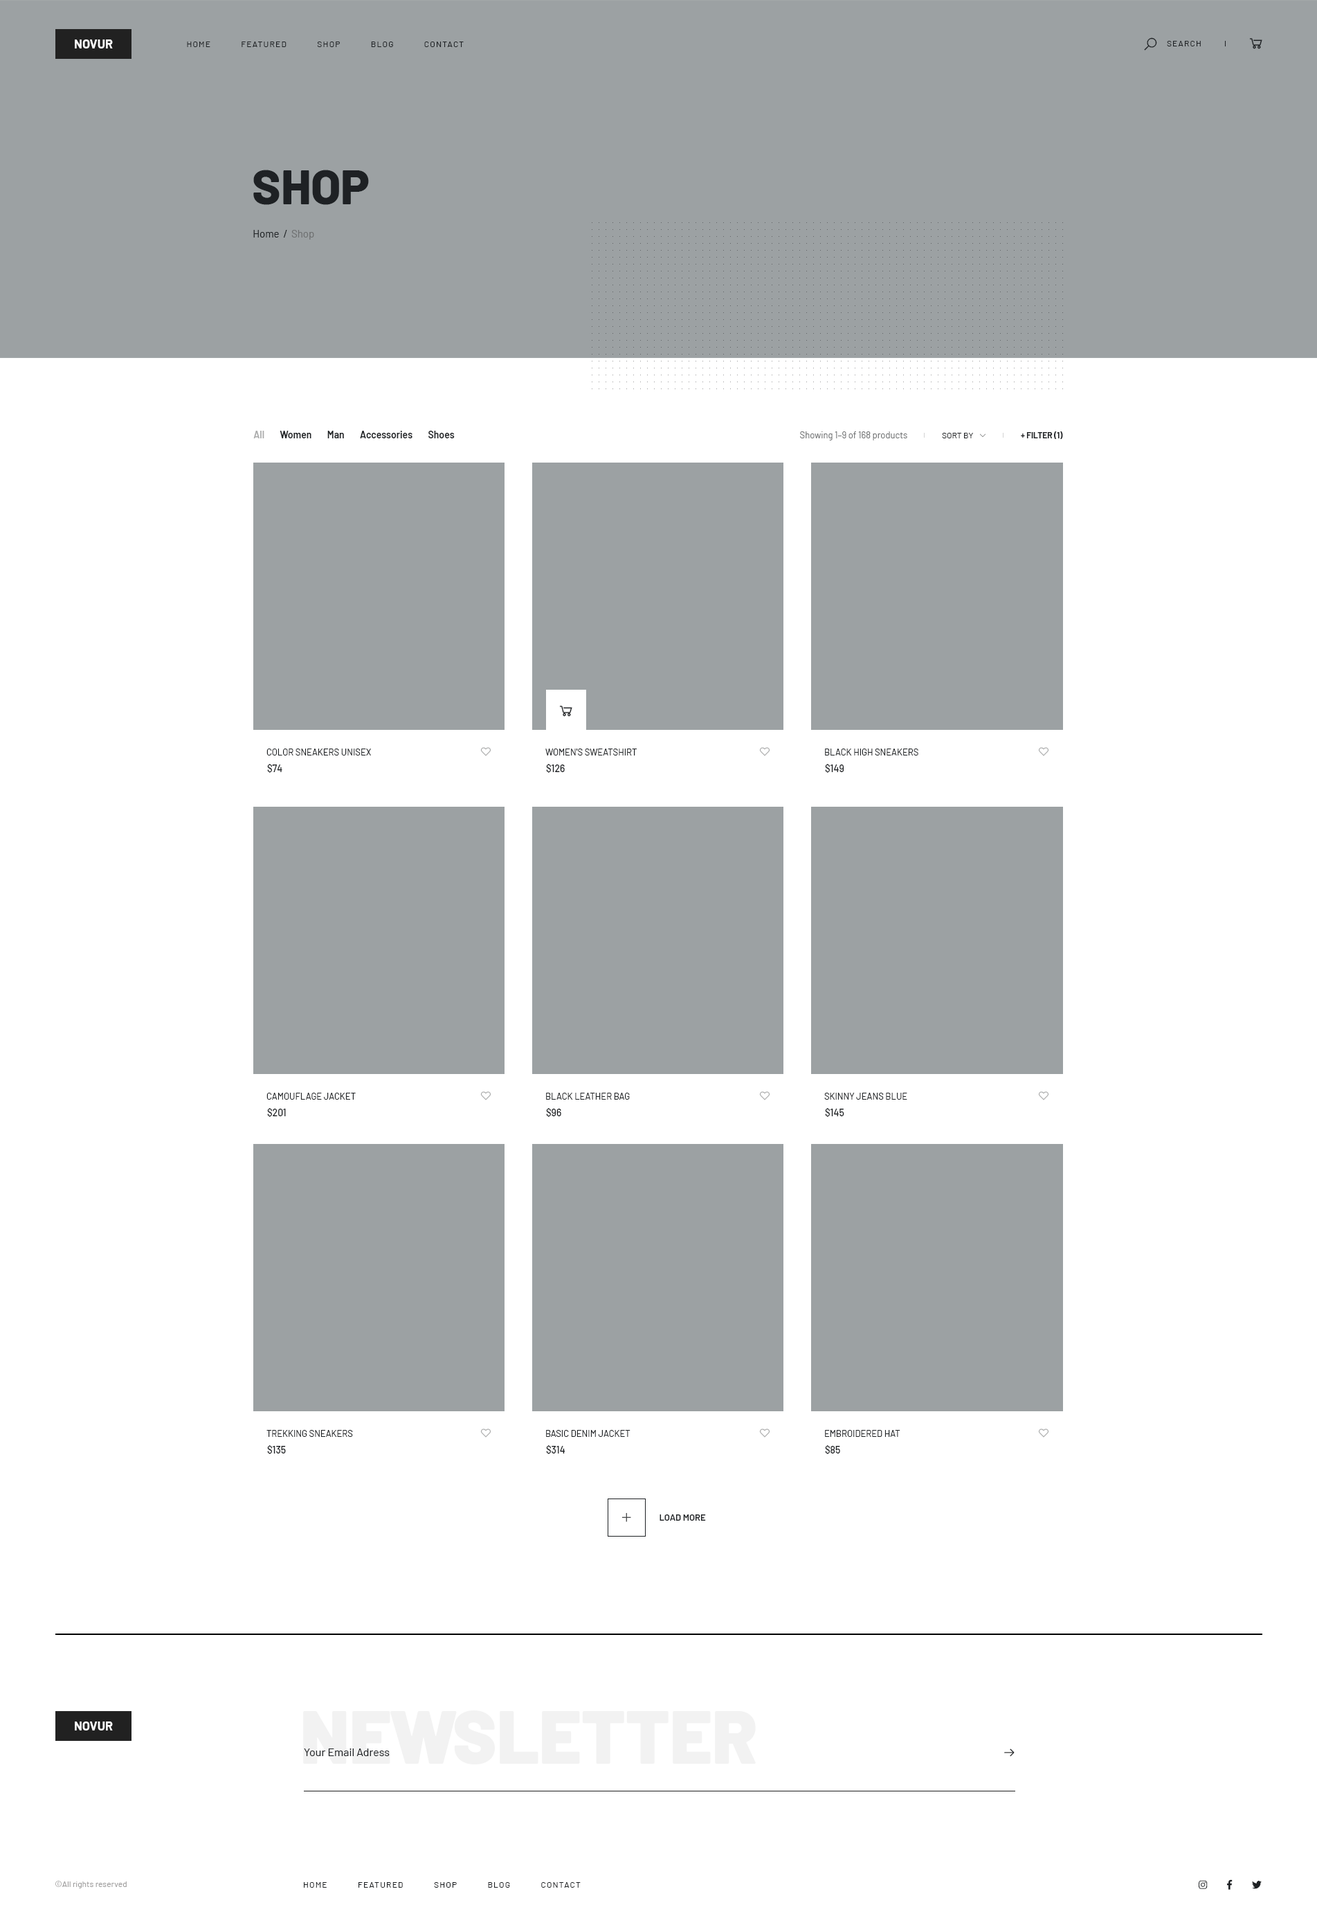
<style>
.page{position:relative;width:1317px;height:1932px;background:#ffffff}
.page>*{position:absolute;margin:0}
.t1{font:12.5px "Barlow-Bold";color:#fefefe;text-transform:uppercase}
.t2{font:8.3px "Barlow-Regular";letter-spacing:0.1em;color:#1e2124;text-transform:uppercase}
.t3{font:48.5px "Barlow-ExtraBold";color:#1e2124;text-transform:uppercase}
.t4{font:10.4px "Barlow-Regular";color:#1e2124}
.t5{font:10.4px "Barlow-Regular";color:#6e7071}
.t6{font:9.7px "Barlow-SemiBold";color:#1e2124}
.t7{font:9.7px "Barlow-SemiBold";color:#aaabab}
.t8{font:9px "Barlow-Regular";color:#6e7071}
.t9{font:8.3px "Barlow-Regular";color:#1e2124;text-transform:uppercase}
.t10{font:8.3px "Barlow-Bold";color:#1e2124;text-transform:uppercase}
.t11{font:9px "Barlow-Regular";color:#1e2124;text-transform:uppercase}
.t12{font:9.7px "Barlow-Medium";color:#1e2124}
.t13{font:9px "Barlow-SemiBold";color:#1e2124;text-transform:uppercase}
.t14{font:74.1px "Barlow-Black";color:#f2f2f2}
.t15{font:11.1px "Barlow-Regular";color:#1e2124}
.t16{font:8.3px "Barlow-Regular";color:#9e9d9d}
</style>
<div class="page">
<p class="t1" style="left:75px;top:39px;width:38px;height:9px">novur</p>
<p class="t2" style="left:187px;top:42px;width:277px;height:5px">Home            Featured            Shop            Blog            Contact</p>
<p class="t2" style="left:1167px;top:41px;width:34px;height:5px">Search</p>
<p class="t3" style="left:253px;top:170px;width:116px;height:35px">Shop</p>
<p class="t4" style="left:253px;top:230px;width:61px;height:10px">Home  /<span class="t5">  Shop</span></p>
<p class="t6" style="left:253px;top:431px;width:202px;height:7px"><span class="t7">All</span>        Women        Man        Accessories        Shoes</p>
<p class="t8" style="left:800px;top:431px;width:108px;height:9px">Showing 1–9 of 168 products</p>
<p class="t9" style="left:942px;top:433px;width:31px;height:5px">Sort by</p>
<p class="t10" style="left:1021px;top:431px;width:42px;height:8px">+ Filter (1)</p>
<p class="t11" style="left:267px;top:748px;width:104px;height:7px">Color Sneakers Unisex</p>
<p class="t11" style="left:546px;top:748px;width:91px;height:7px">Women's Sweatshirt</p>
<p class="t11" style="left:825px;top:748px;width:94px;height:7px">Black High Sneakers</p>
<p class="t12" style="left:267px;top:764px;width:15px;height:9px">$74</p>
<p class="t12" style="left:546px;top:764px;width:19px;height:9px">$126</p>
<p class="t12" style="left:825px;top:764px;width:20px;height:9px">$149</p>
<p class="t11" style="left:267px;top:1092px;width:89px;height:7px">Camouflage Jacket</p>
<p class="t11" style="left:546px;top:1092px;width:84px;height:7px">Black Leather Bag</p>
<p class="t11" style="left:825px;top:1092px;width:83px;height:7px">Skinny Jeans Blue</p>
<p class="t12" style="left:267px;top:1108px;width:19px;height:9px">$201</p>
<p class="t12" style="left:546px;top:1108px;width:15px;height:9px">$96</p>
<p class="t12" style="left:825px;top:1108px;width:20px;height:9px">$145</p>
<p class="t11" style="left:267px;top:1430px;width:86px;height:7px">Trekking Sneakers</p>
<p class="t11" style="left:546px;top:1430px;width:85px;height:7px">Basic Denim Jacket</p>
<p class="t11" style="left:825px;top:1430px;width:76px;height:7px">Embroidered Hat</p>
<p class="t12" style="left:267px;top:1445px;width:19px;height:9px">$135</p>
<p class="t12" style="left:546px;top:1445px;width:20px;height:9px">$314</p>
<p class="t12" style="left:825px;top:1445px;width:15px;height:9px">$85</p>
<p class="t13" style="left:660px;top:1514px;width:46px;height:6px">Load More</p>
<p class="t14" style="left:303px;top:1710px;width:453px;height:54px">NEWSLETTER</p>
<p class="t1" style="left:75px;top:1721px;width:38px;height:9px">Novur</p>
<p class="t15" style="left:304px;top:1748px;width:86px;height:8px">Your Email Adress</p>
<p class="t16" style="left:55px;top:1880px;width:72px;height:8px">©All rights reserved</p>
<p class="t2" style="left:304px;top:1882px;width:277px;height:5px">Home            Featured            Shop            Blog            Contact</p>
</div>
